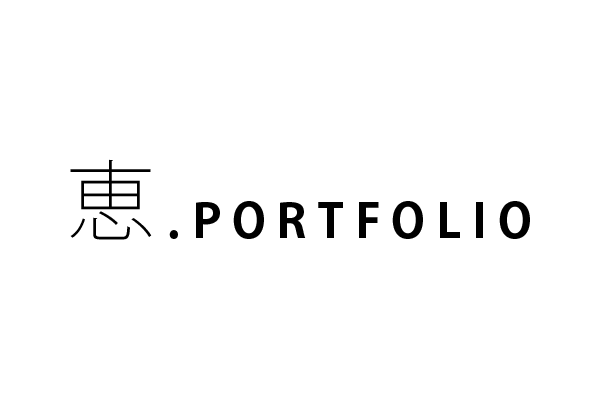
<style>
.page{position:relative;width:600px;height:400px;background:#ffffff}
.page>*{position:absolute;margin:0}
.t1{font:47px "KozGoPr6N-Bold";letter-spacing:0.24em;color:#000000}
.t2{font:88.5px "KozGoPr6N-ExtraLight";letter-spacing:0.1em;color:#000000}
</style>
<div class="page">
<p class="t1" style="left:70px;top:159px;width:460px;height:81px"><span class="t2">恵</span>.PORTFOLIO</p>
</div>
